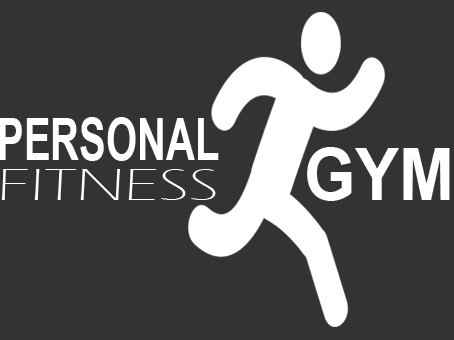
<style>
.page{position:relative;width:454px;height:340px;background:#333333}
.page>*{position:absolute;margin:0}
.t1{font:58.3px "Arial-BoldMT";color:#ffffff;scale:0.69 1}
.t2{font:72.2px "Arial-BoldMT";color:#ffffff;scale:0.91 1}
.t3{font:47.2px "ErasITC-Light";color:#ffffff;scale:1.42 1}
</style>
<div class="page">
<p class="t1" style="left:0px;top:117px;width:219px;height:44px">PERSONAL</p>
<p class="t2" style="left:307px;top:147px;width:143px;height:54px">GYM</p>
<p class="t3" style="left:1px;top:169px;width:215px;height:31px">FITNESS</p>
</div>
